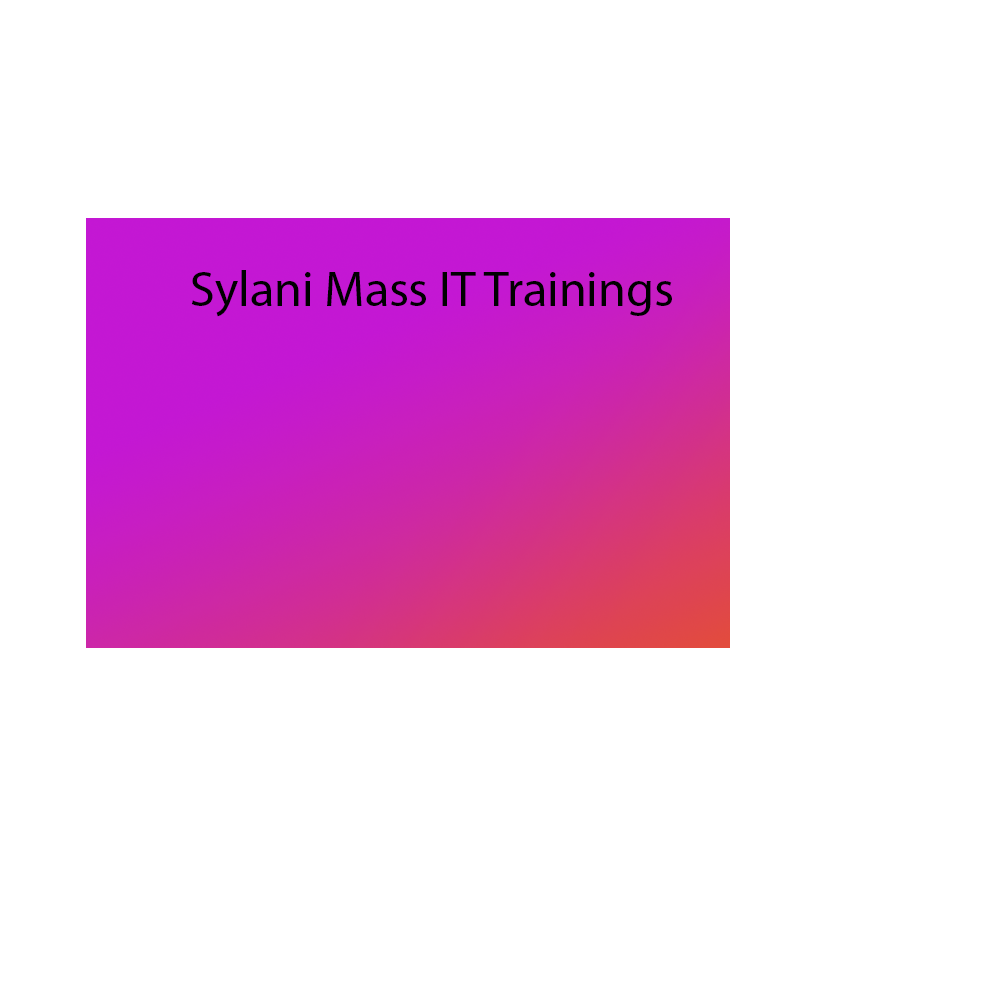
<style>
.page{position:relative;width:1000px;height:1000px;background:#ffffff}
.page>*{position:absolute;margin:0}
.t1{font:50px "MyriadPro-Regular";color:#000000}
</style>
<div class="page">
<p class="t1" style="left:191px;top:270px;width:481px;height:47px">Sylani Mass IT Trainings</p>
</div>
